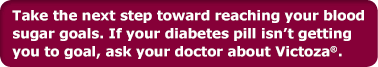
<style>
.page{position:relative;width:378px;height:67px;background:#860038}
.page>*{position:absolute;margin:0}
.t1{font:13.5px/18px "Verdana-Bold";letter-spacing:-0.005em;color:#ffffff}
</style>
<div class="page">
<p class="t1" style="left:12px;top:10px;width:352px;height:49px">Take the next step toward reaching your blood <br>sugar goals. If your diabetes pill isn’t getting <br>you to goal, ask your doctor about Victoza®.</p>
</div>
